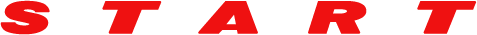
<style>
.page{position:relative;width:477px;height:35px;background:#ffffff}
.page>*{position:absolute;margin:0}
.t1{font:60px "Tactical-Espionage-Action";letter-spacing:0.9em;color:#ef1111;text-transform:uppercase;font-weight:bold}
</style>
<div class="page">
<p class="t1" style="left:0px;top:0px;width:477px;height:35px">START</p>
</div>
